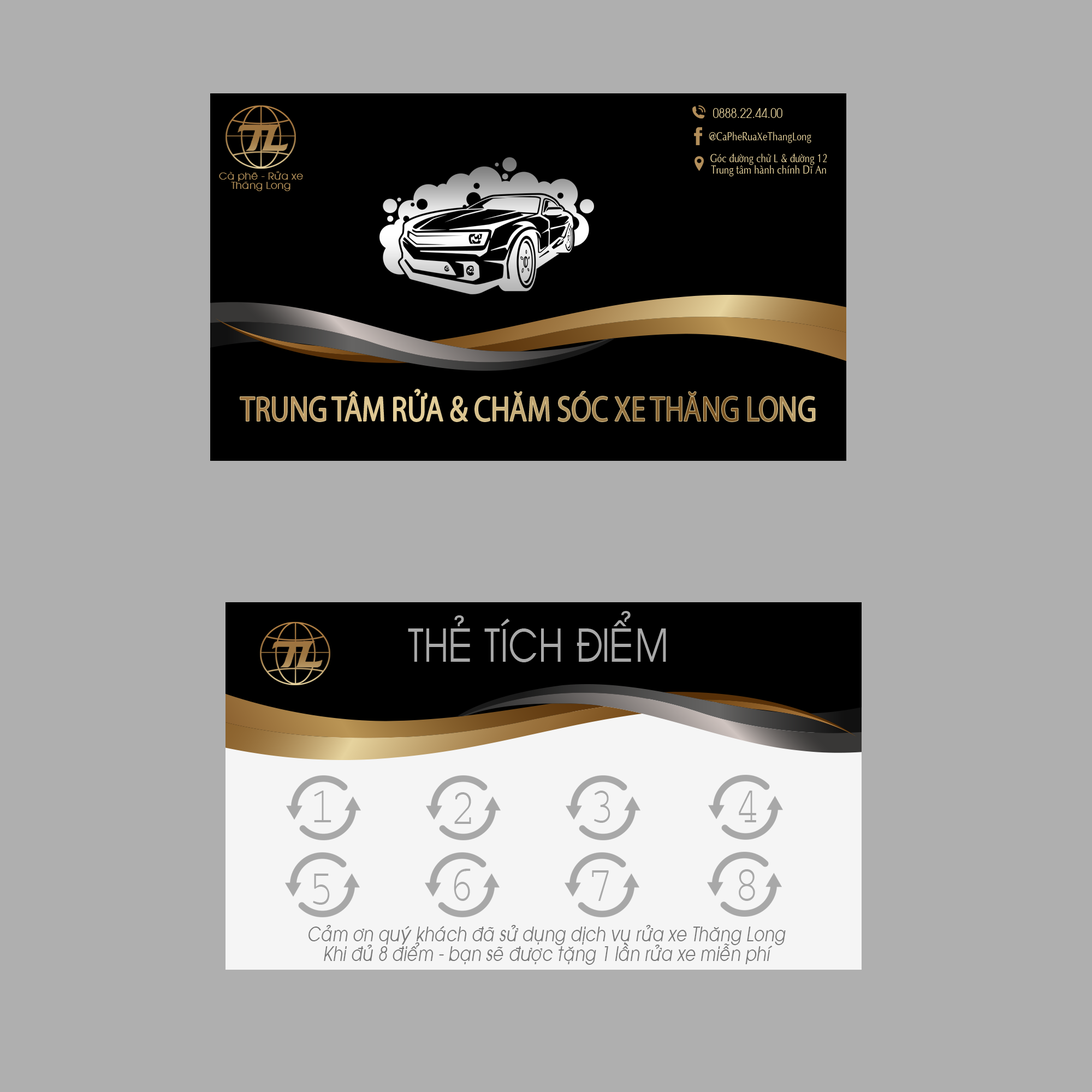
<style>
.page{position:relative;width:1092px;height:1092px;background:#afafaf}
.page>*{position:absolute;margin:0}
.t1{font:13.2px "VNI-Avo";color:#e3cf9a;scale:0.82 1}
.t2{font:11.2px "VNI-Aptima";color:#e3cf9a;scale:0.82 1}
.t3{font:11.2px/11px "VNI-Aptima";color:#e3cf9a;scale:0.82 1}
.t4{font:9.9px/9.7px "VNI-Avo";color:#ae8d59;scale:1.04 1}
.t5{font:35.5px "MyriadPro-Regular";scale:0.82 1}
.t6{font:44.1px "VNI-Avo";color:#a8a8a8;scale:0.82 1}
.t7{font:44.1px "VNI-Couri";color:#a8a8a8;scale:0.82 1}
.t8{font:19.7px/19.4px "VNI-Avo";color:#767676;font-style:italic;scale:0.82 1}
</style>
<div class="page">
<p class="t1" style="left:713px;top:108px;width:69px;height:10px">0888.22.44.00</p>
<p class="t2" style="left:709px;top:132px;width:102px;height:11px">@CaPheRuaXeThangLong</p>
<p class="t3" style="left:710px;top:153px;width:117px;height:23px;text-align:center">Goùc ñöôøng chöû L &amp; ñöôøng 12<br>Trung taâm haønh chính Dó An</p>
<p class="t4" style="left:219px;top:171px;width:84px;height:20px;text-align:center">Caø pheâ - Röûa xe<br>Thaêng Long</p>
<p class="t5" style="left:240px;top:389px;width:575px;height:33px">TRUNG TÂM RỬA &amp; CHĂM SÓC XE THĂNG LONG</p>
<p class="t6" style="left:408px;top:611px;width:258px;height:51px">THEÛ TÍCH ÑIEÅM</p>
<p class="t7" style="left:314px;top:791px;width:17px;height:31px">1</p>
<p class="t7" style="left:454px;top:792px;width:17px;height:32px">2</p>
<p class="t7" style="left:594px;top:791px;width:16px;height:32px">3</p>
<p class="t7" style="left:739px;top:791px;width:17px;height:31px">4</p>
<p class="t7" style="left:454px;top:869px;width:17px;height:32px">6</p>
<p class="t7" style="left:739px;top:869px;width:16px;height:32px">8</p>
<p class="t7" style="left:313px;top:874px;width:17px;height:31px">5</p>
<p class="t7" style="left:592px;top:870px;width:17px;height:31px">7</p>
<p class="t8" style="left:308px;top:925px;width:478px;height:40px;text-align:center">Caûm ôn quyù khaùch ñaõ söû duïng dòch vuï röûa xe Thaêng Long<br>Khi ñuû 8 ñieåm - baïn seõ ñöôïc taëng 1 laàn röûa xe mieãn phí</p>
</div>
